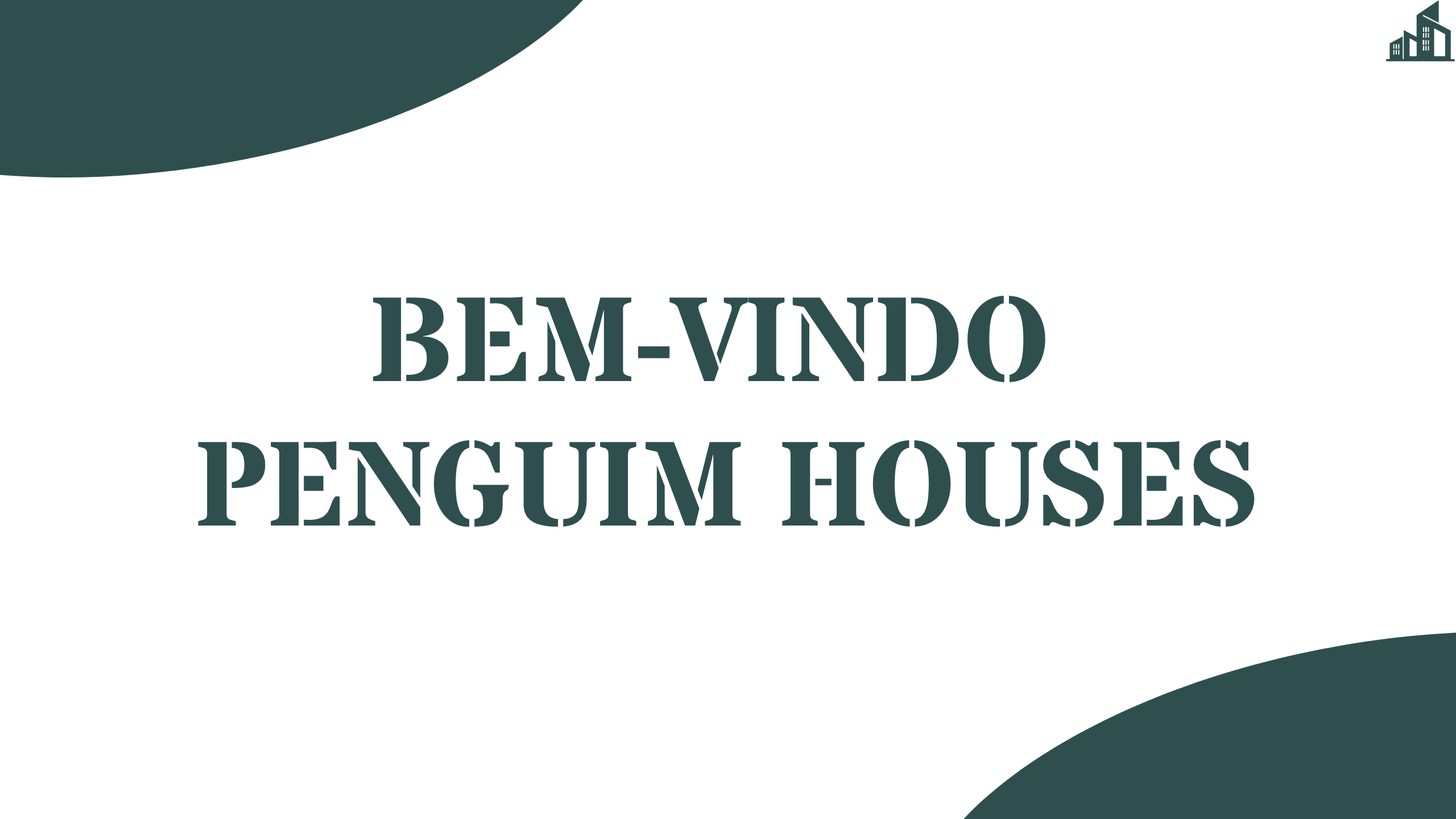
<style>
.page{position:relative;width:1456px;height:819px;background:#ffffff}
.page>*{position:absolute;margin:0}
.t1{font:120.3px "StardosStencil-Bold";color:#2f4f4f}
</style>
<div class="page">
<p class="t1" style="left:198px;top:296px;width:1057px;height:231px;text-align:center">BEM-VINDO <br>PENGUIM HOUSES</p>
</div>
